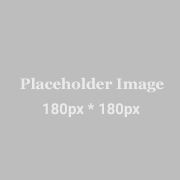
<style>
.page{position:relative;width:180px;height:180px;background:#bdbdbd}
.page>*{position:absolute;margin:0}
.t1{font:15px "Georgia-Bold";color:#ebeaea}
.t2{font:15px "Roboto-Bold";color:#ebeaea}
</style>
<div class="page">
<p class="t1" style="left:20px;top:77px;width:144px;height:16px">Placeholder Image</p>
<p class="t2" style="left:43px;top:103px;width:97px;height:14px">180px * 180px</p>
</div>
